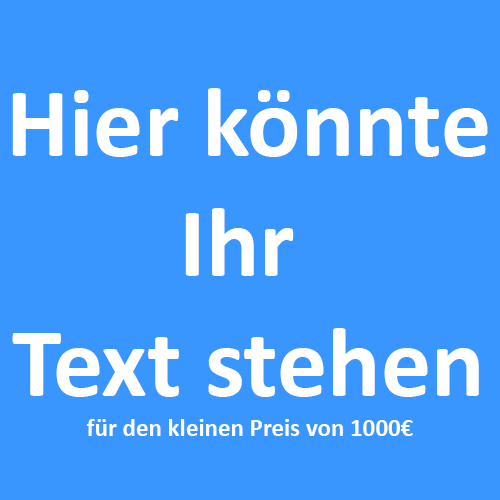
<style>
.page{position:relative;width:500px;height:500px;background:#3996ff}
.page>*{position:absolute;margin:0}
.t1{font:100px "Calibri-Bold";color:#ffffff}
.t2{font:25px "Calibri-Bold";color:#ffffff}
</style>
<div class="page">
<p class="t1" style="left:12px;top:88px;width:476px;height:309px;text-align:center">Hier könnte<br>Ihr <br>Text stehen</p>
<p class="t2" style="left:86px;top:419px;width:327px;height:17px">für den kleinen Preis von 1000€</p>
</div>
